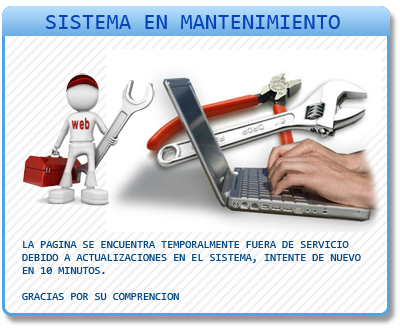
<style>
.page{position:relative;width:400px;height:329px;background:#ffffff}
.page>*{position:absolute;margin:0}
.t1{font:22.4px "Consolas";color:#0644b5}
.t2{font:11px "Consolas";color:#014a88}
</style>
<div class="page">
<p class="t1" style="left:46px;top:15px;width:294px;height:14px">SISTEMA EN MANTENIMIENTO</p>
<p class="t2" style="left:22px;top:241px;width:339px;height:59px">LA PAGINA SE ENCUENTRA TEMPORALMENTE FUERA DE SERVICIO DEBIDO A ACTUALIZACIONES EN EL SISTEMA, INTENTE DE NUEVO EN 10 MINUTOS.<br><br>GRACIAS POR SU COMPRENCION</p>
</div>
